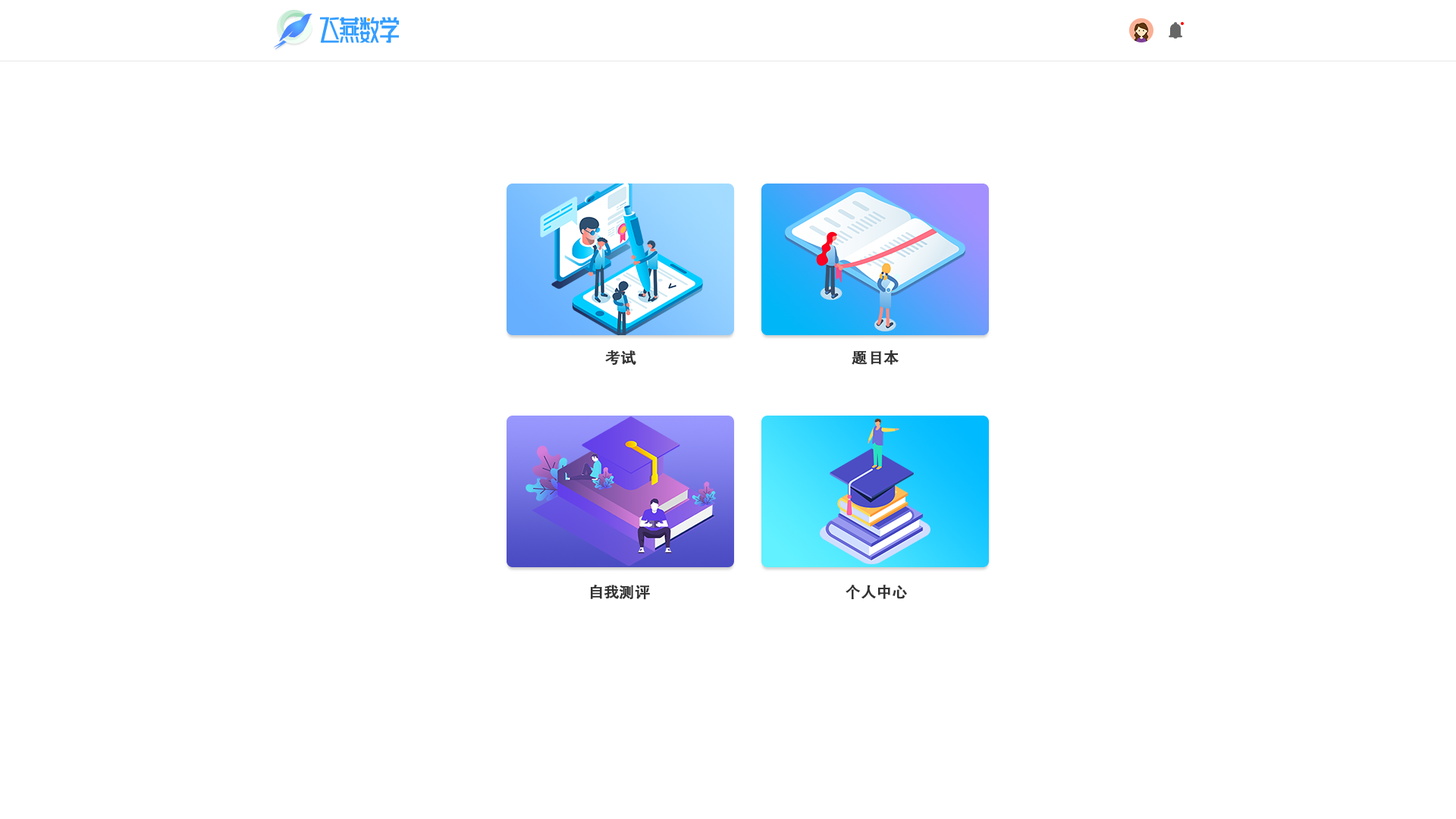
<style>
.page{position:relative;width:1456px;height:819px;background:#ffffff}
.page>*{position:absolute;margin:0}
.t1{font:15.2px "AdobeHeitiStd-Regular";color:#333333;font-weight:bold}
</style>
<div class="page">
<p class="t1" style="left:605px;top:350px;width:31px;height:16px">考试</p>
<p class="t1" style="left:852px;top:350px;width:47px;height:15px">题目本</p>
<p class="t1" style="left:590px;top:585px;width:60px;height:15px">自我测评</p>
<p class="t1" style="left:846px;top:585px;width:61px;height:15px">个人中心</p>
</div>
